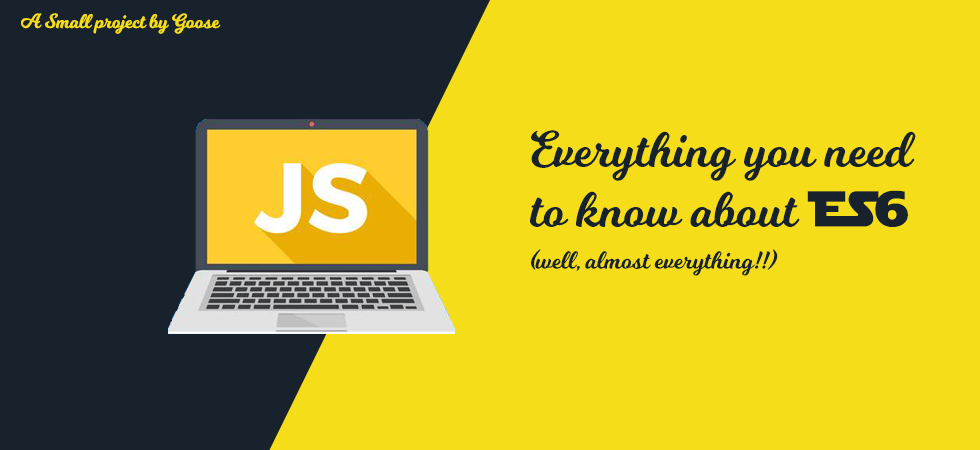
<style>
.page{position:relative;width:980px;height:450px;background:#f5de19}
.page>*{position:absolute;margin:0}
.t1{font:20px "Milkshake";color:#f5de19}
.t2{font:50px "Milkshake";color:#17222c}
.t3{font:50px "StarJedi";color:#17222c}
.t4{font:25px "Milkshake";color:#17222c}
</style>
<div class="page">
<p class="t1" style="left:21px;top:13px;width:200px;height:21px">A Small project by Goose</p>
<p class="t2" style="left:530px;top:130px;width:386px;height:97px">Everything you need to know about  <span class="t3">ES6</span></p>
<p class="t4" style="left:531px;top:249px;width:247px;height:27px">(well, almost everything!!)</p>
</div>
